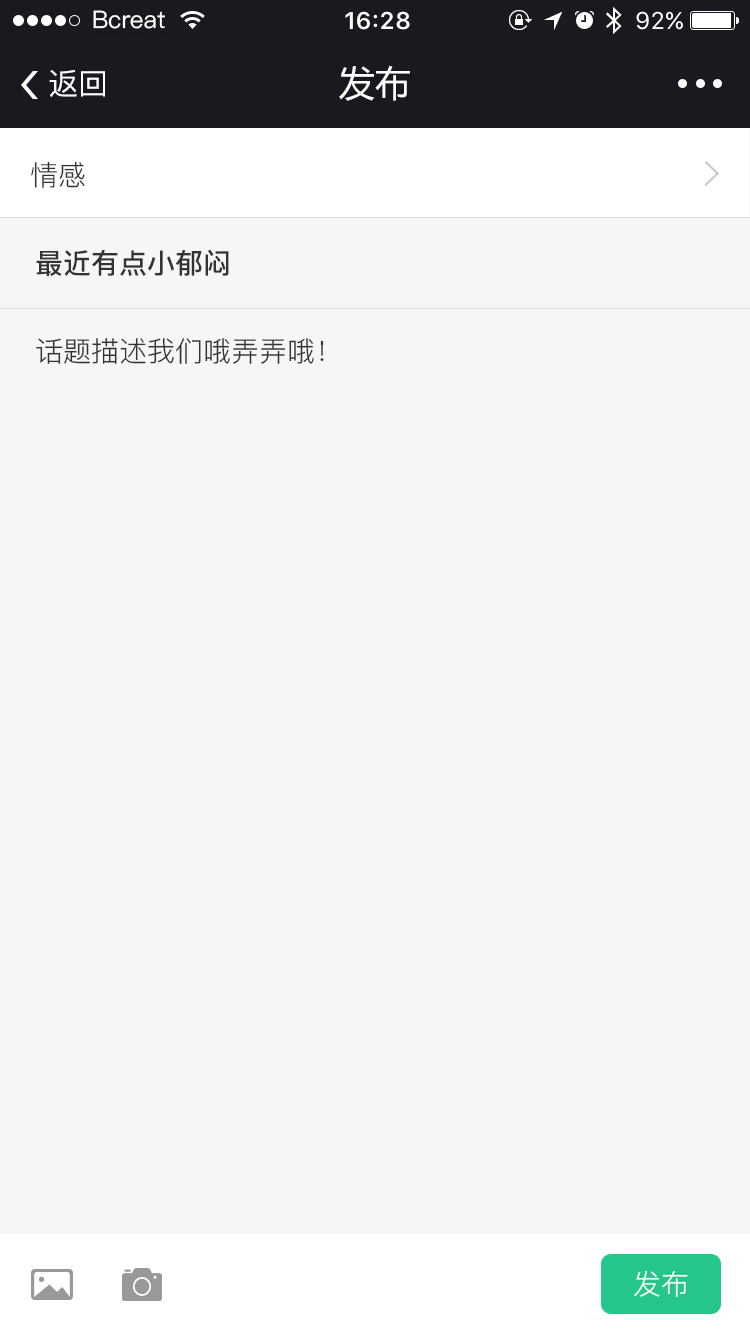
<style>
.page{position:relative;width:750px;height:1334px;background:#f4f6f7}
.page>*{position:absolute;margin:0}
.t1{font:24px "PingFang-SC-Medium";color:#ffffff}
.t2{font:36px "MicrosoftYaHei";color:#ffffff}
.t3{font:30px "PingFang-SC-Medium";color:#ffffff}
.t4{font:28px "PingFang-SC-Regular";color:#333333}
.t5{font:28px "PingFang-SC-Bold";color:#333333}
.t6{font:28px "PingFang-SC-Regular";color:#ffffff}
</style>
<div class="page">
<p class="t1" style="left:93px;top:10px;width:72px;height:19px">Bcreat</p>
<p class="t2" style="left:339px;top:65px;width:71px;height:36px">发布</p>
<p class="t3" style="left:49px;top:69px;width:56px;height:28px">返回</p>
<p class="t4" style="left:31px;top:161px;width:54px;height:27px">情感</p>
<p class="t5" style="left:36px;top:249px;width:193px;height:27px">最近有点小郁闷</p>
<p class="t4" style="left:36px;top:338px;width:288px;height:26px">话题描述我们哦弄弄哦！</p>
<p class="t6" style="left:634px;top:1270px;width:54px;height:27px">发布</p>
</div>
